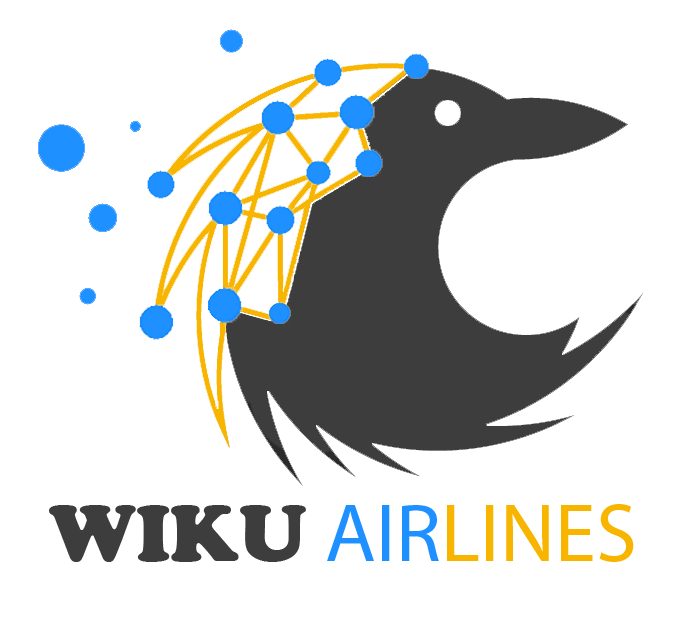
<style>
.page{position:relative;width:688px;height:624px;background:#ffffff}
.page>*{position:absolute;margin:0}
.t1{font:83.3px "MyriadPro-Regular";color:#f8b500}
.t2{font:83.3px "CooperBlack";color:#3d3d3d}
.t3{font:83.3px "MyriadPro-Regular";color:#1e90ff}
</style>
<div class="page">
<p class="t1" style="left:49px;top:504px;width:585px;height:58px"><span class="t2">WIKU </span><span class="t3">AIR</span>LINES</p>
</div>
